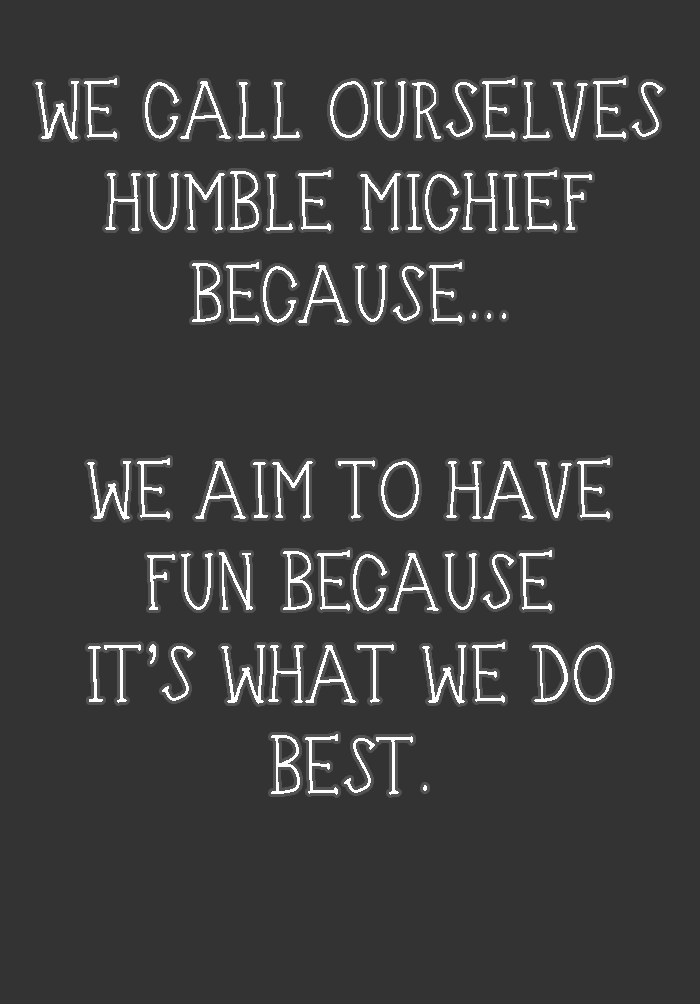
<style>
.page{position:relative;width:700px;height:1004px;background:#333333}
.page>*{position:absolute;margin:0}
.t1{font:80px/92px "BeforeBreakfast-Medium";color:#ffffff}
</style>
<div class="page">
<p class="t1" style="left:35px;top:78px;width:628px;height:245px;text-align:center">WE CALL OURSELVES<br>HUMBLE MICHIEF<br>BECAUSE...</p>
<p class="t1" style="left:87px;top:458px;width:525px;height:337px;text-align:center">WE AIM TO HAVE<br>FUN BECAUSE<br>IT’S WHAT WE DO<br>BEST.</p>
</div>
